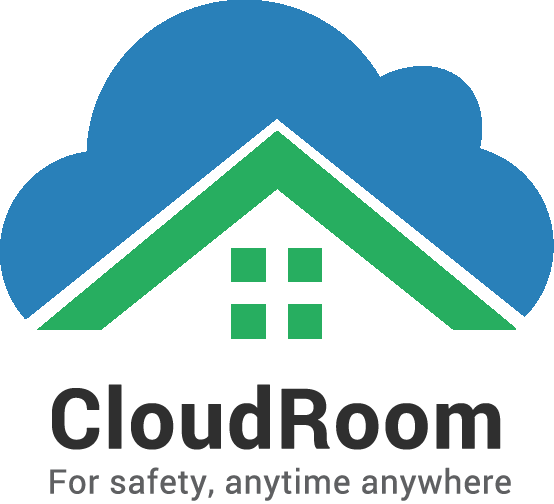
<style>
.page{position:relative;width:554px;height:504px;background:#ffffff}
.page>*{position:absolute;margin:0}
.t1{font:83.3px "Roboto-Bold";color:#2f2f2f;font-weight:bold}
.t2{font:33.3px "Roboto-Regular";color:#5f6062;font-weight:bold}
</style>
<div class="page">
<p class="t1" style="left:52px;top:384px;width:449px;height:66px">CloudRoom</p>
<p class="t2" style="left:50px;top:467px;width:461px;height:34px">For safety, anytime anywhere</p>
</div>
